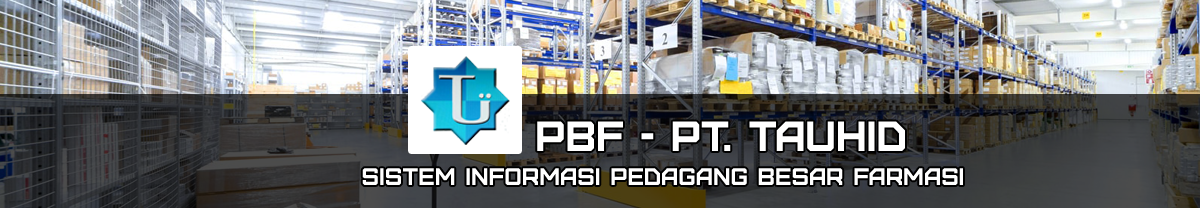
<style>
.page{position:relative;width:1200px;height:208px}
.page>*{position:absolute;margin:0}
.t1{font:42px "Furore";color:#ffffff}
.t2{font:24px "Furore";color:#ffffff}
.t3{font:60px "Furore";color:#ffffff}
</style>
<div class="page">
<p class="t1" style="left:537px;top:121px;width:368px;height:30px">PBF - PT. TAUHID</p>
<p class="t2" style="left:362px;top:168px;width:601px;height:17px"><span class="t3">    </span>SISTEM INFORMASI PEDAGANG BESAR FARMASI</p>
</div>
